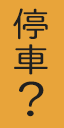
<style>
.page{position:relative;width:64px;height:128px;background:#e8a43a}
.page>*{position:absolute;margin:0}
.t1{font:33.2px/35.6px "TBChibiRGoPlusKPro-Regular";color:#202020;scale:1.14 1}
.t2{font:42.7px/35.6px "TBChibiRGoPlusKPro-Regular";color:#202020;scale:1.14 1}
</style>
<div class="page">
<p class="t1" style="left:13px;top:8px;width:35px;height:109px;text-align:center">停<br>車<br><span class="t2">？</span></p>
</div>
